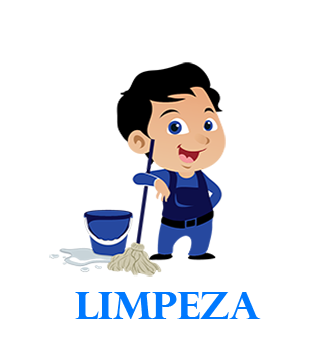
<style>
.page{position:relative;width:318px;height:346px;background:#ffffff}
.page>*{position:absolute;margin:0}
.t1{font:37.5px "PerpetuaTitlingMT-Bold";color:#0079ff;scale:1.05 1}
</style>
<div class="page">
<p class="t1" style="left:75px;top:292px;width:186px;height:27px">limpeza</p>
</div>
